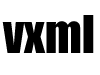
<style>
.page{position:relative;width:100px;height:75px;background:#ffffff}
.page>*{position:absolute;margin:0}
.t1{font:48px "Impact";color:#000000}
</style>
<div class="page">
<p class="t1" style="left:2px;top:15px;width:92px;height:38px">vxml</p>
</div>
